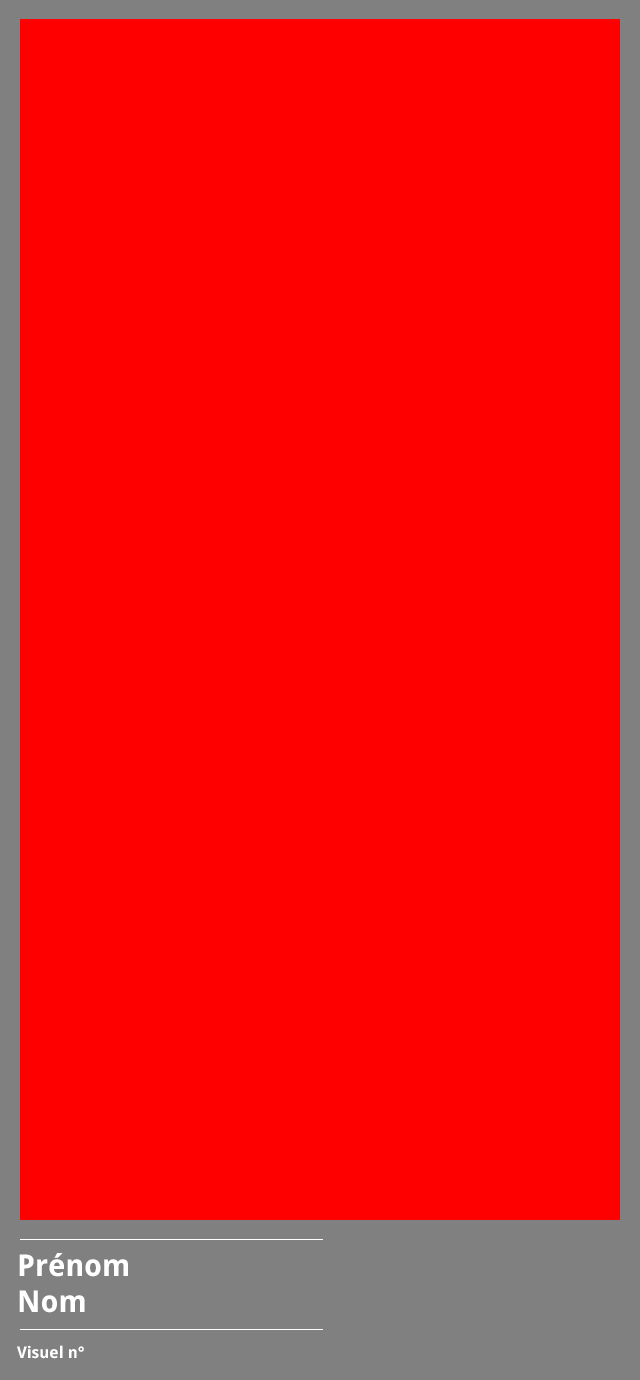
<style>
.page{position:relative;width:640px;height:1380px;background:#ff0000}
.page>*{position:absolute;margin:0}
.t1{font:30px "DroidSans-Bold";color:#ffffff}
.t2{font:16px "DroidSans-Bold";color:#ffffff}
</style>
<div class="page">
<p class="t1" style="left:19px;top:1253px;width:109px;height:60px">Prénom<br>Nom</p>
<p class="t2" style="left:17px;top:1345px;width:67px;height:14px">Visuel n°</p>
</div>
